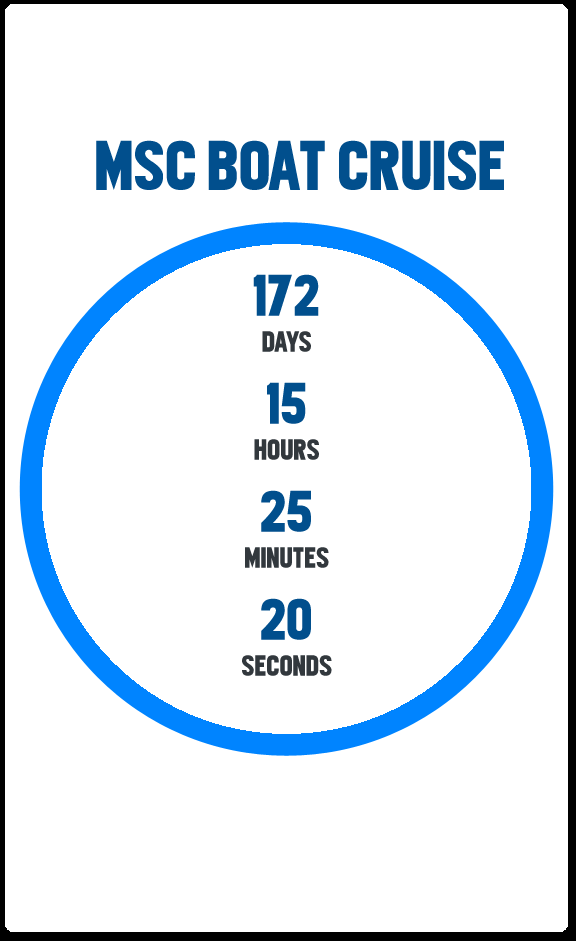
<style>
.page{position:relative;width:576px;height:941px;background:#ffffff}
.page>*{position:absolute;margin:0}
.t1{font:72px "FrontPageNews1.1";color:#014f8d}
.t2{font:30px "FrontPageNews1.1";color:#32383d}
.t3{font:60px "FrontPageNews1.1";color:#014f8d}
</style>
<div class="page">
<p class="t1" style="left:96px;top:140px;width:408px;height:50px">MSC BOAT CRUISE</p>
<p class="t2" style="left:242px;top:274px;width:90px;height:402px;text-align:center"><span class="t3">172 <br></span>DAYS<br><span class="t3">15<br></span>HOURS<br><span class="t3">25<br></span>MINUTES<br><span class="t3">20<br></span>SECONDS</p>
</div>
